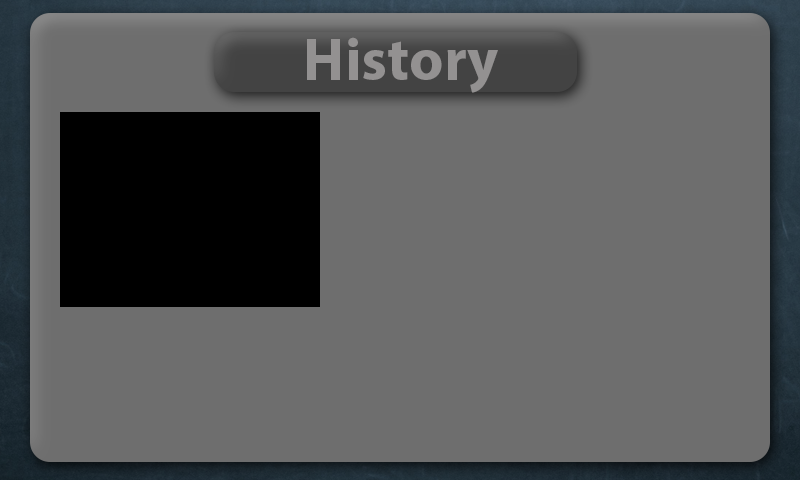
<style>
.page{position:relative;width:800px;height:480px;background:#6e6e6e}
.page>*{position:absolute;margin:0}
.t1{font:60px "MyriadPro-Bold";color:#939191}
</style>
<div class="page">
<p class="t1" style="left:307px;top:37px;width:191px;height:56px">History</p>
</div>
